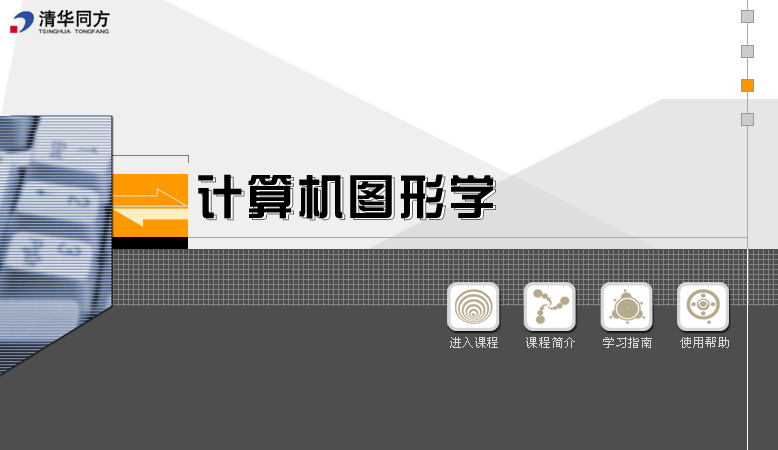
<style>
.page{position:relative;width:778px;height:450px;background:#4e4e4e}
.page>*{position:absolute;margin:0}
.t1{font:48px "¾­µä×ÛÒÕÌå¼ò-regular";letter-spacing:0.05em;color:#000000}
.t2{font:12px "SimSun";letter-spacing:0.05em;color:#d8d8d8}
</style>
<div class="page">
<p class="t1" style="left:198px;top:174px;width:295px;height:45px">计算机图形学</p>
<p class="t2" style="left:450px;top:337px;width:279px;height:11px">进入课程    课程简介    学习指南    使用帮助</p>
</div>
